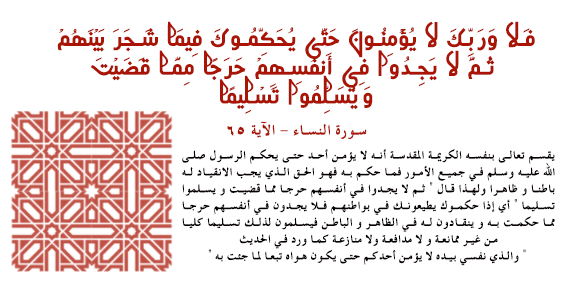
<style>
.page{position:relative;width:567px;height:283px;background:#ffffff}
.page>*{position:absolute;margin:0}
.t1{font:24px "AlQalamIshtiaq";letter-spacing:0.05em;color:#aa1404}
.t2{font:18px "AlBayan-Bold";letter-spacing:0.05em;color:#aa1404}
.t3{font:14px "AlBayan-Bold";letter-spacing:0.05em;color:#060100}
</style>
<div class="page">
<p class="t1" style="left:57px;top:21px;width:478px;height:93px;text-align:justify">فَلا وَرَبِّكَ لا يُؤْمِنُونَ حَتَّى يُحَكِّمُوكَ فِيمَا شَجَرَ بَيْنَهُمْ<br> ثُمَّ لا يَجِدُوا فِي أَنفُسِهِمْ حَرَجًا مِمَّا قَضَيْتَ <br>وَيُسَلِّمُوا تَسْلِيمًا</p>
<p class="t2" style="left:227px;top:121px;width:140px;height:19px">سورة النساء - الآية ٦٥</p>
<p class="t3" style="left:182px;top:149px;width:373px;height:117px;text-align:justify">يقسم تعالى بنفسه الكريمة المقدسة أنه لا يؤمن أحد حتى يحكم الرسول صلى الله عليه وسلم في جميع الأمور فما حكم به فهو الحق الذي يجب الانقياد له باطنا و ظاهرا ولهذا قال " ثم لا يجدوا في أنفسهم حرجا مما قضيت و يسلموا تسليما " أي إذا حكموك يطيعونك في بواطنهم فلا يجدون في أنفسهم حرجا مما حكمت به و ينقادون له في الظاهر و الباطن فيسلمون لذلك تسليما كليا من غير ممانعة و لا مدافعة ولا منازعة كما ورد في الحديث<br> " والذي نفسي بيده لا يؤمن أحدكم حتى يكون هواه تبعا لما جئت به "</p>
</div>
